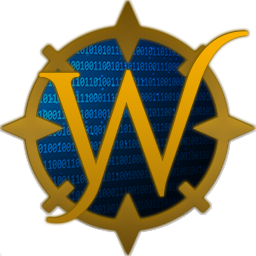
<style>
.page{position:relative;width:256px;height:256px;background:#ffffff}
.page>*{position:absolute;margin:0}
.t1{font:170px "CinzelDecorative-Regular";letter-spacing:0.06em;color:#d79803;font-weight:bold}
</style>
<div class="page">
<p class="t1" style="left:39px;top:31px;width:210px;height:192px">W</p>
</div>
